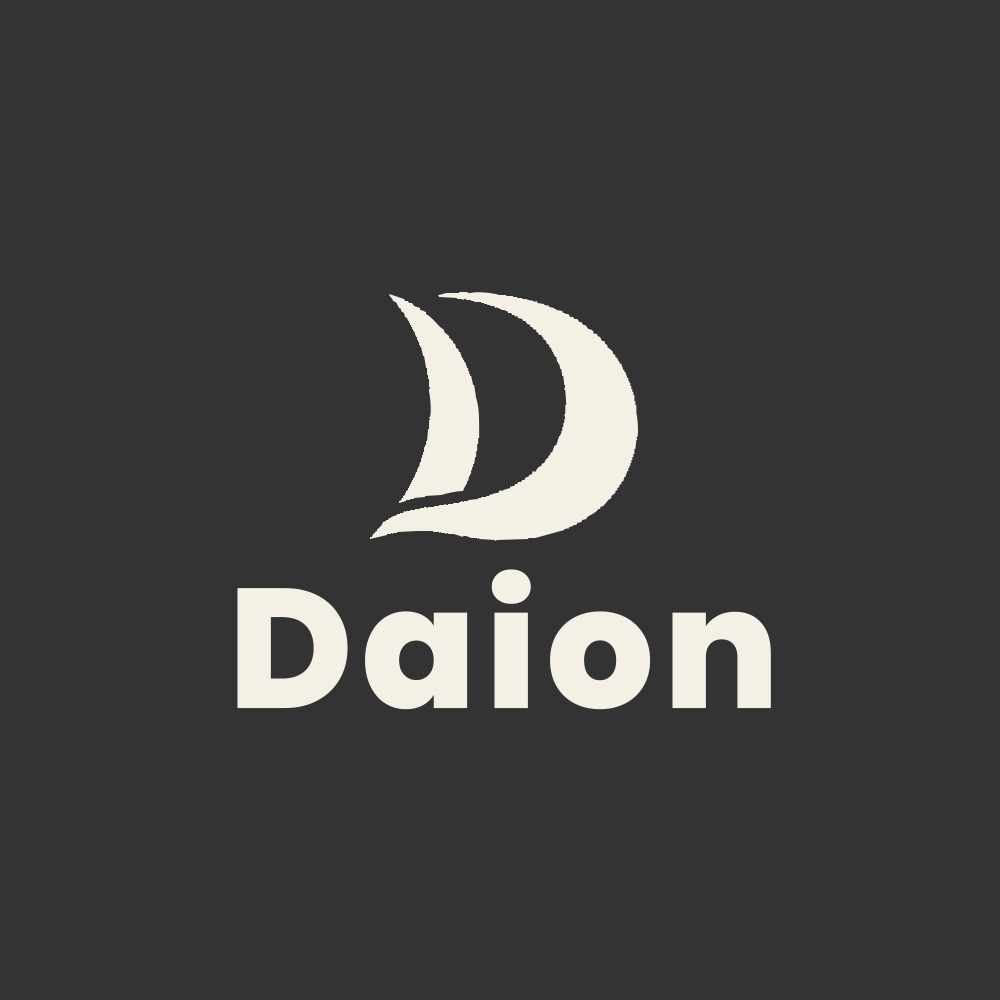
<style>
.page{position:relative;width:1000px;height:1000px;background:#333333}
.page>*{position:absolute;margin:0}
.t1{font:170px "Poppins-ExtraBold";letter-spacing:0.05em;color:#f5f0e6}
</style>
<div class="page">
<p class="t1" style="left:237px;top:569px;width:534px;height:141px">Daion</p>
</div>
